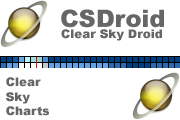
<style>
.page{position:relative;width:180px;height:120px;background:#ffffff}
.page>*{position:absolute;margin:0}
.t1{font:24px "Arial-Black";color:#666666}
.t2{font:12px "Arial-Black";color:#666666}
</style>
<div class="page">
<p class="t1" style="left:61px;top:9px;width:103px;height:19px">CSDroid</p>
<p class="t2" style="left:61px;top:29px;width:101px;height:12px">Clear Sky Droid</p>
<p class="t2" style="left:6px;top:77px;width:43px;height:39px">Clear <br>Sky<br>Charts</p>
</div>
